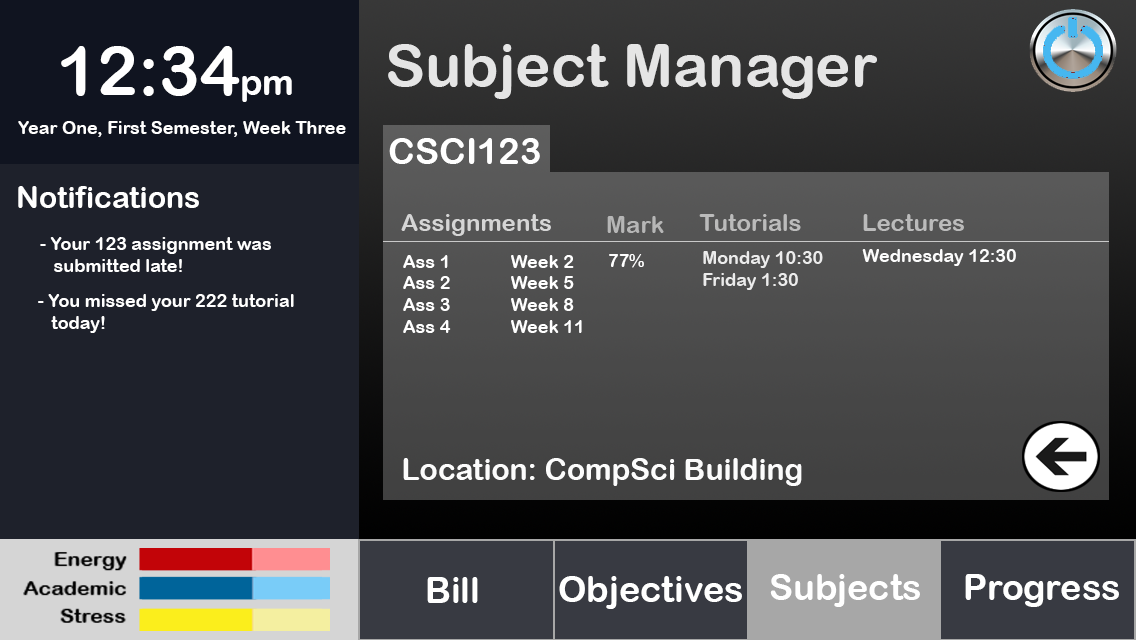
<style>
.page{position:relative;width:1136px;height:640px}
.page>*{position:absolute;margin:0}
.t1{font:68px "ArialRoundedMTBold";color:#ffffff}
.t2{font:36px "ArialRoundedMTBold";color:#ffffff}
.t3{font:60px "ArialRoundedMTBold";color:#e5e5e5}
.t4{font:18px "ArialRoundedMTBold";color:#ffffff}
.t5{font:30px "ArialRoundedMTBold";color:#ffffff}
.t6{font:24px "ArialRoundedMTBold";color:#d5d5d5}
.t7{font:24px "ArialRoundedMTBold";color:#b6b6b6}
.t8{font:24px "ArialRoundedMTBold";color:#bbbbbb}
.t9{font:18px "ArialRoundedMTBold";color:#ececec}
.t10{font:18px "ArialRoundedMTBold";color:#fcfcfc}
.t11{font:30px "ArialRoundedMTBold";color:#fcfcfc}
</style>
<div class="page">
<p class="t1" style="left:61px;top:46px;width:231px;height:56px">12:34<span class="t2">pm</span></p>
<p class="t3" style="left:388px;top:44px;width:489px;height:55px">Subject Manager</p>
<p class="t4" style="left:18px;top:121px;width:328px;height:16px">Year One, First Semester, Week Three</p>
<p class="t2" style="left:389px;top:138px;width:151px;height:26px">CSCI123</p>
<p class="t5" style="left:18px;top:186px;width:181px;height:22px">Notifications</p>
<p class="t6" style="left:401px;top:214px;width:150px;height:22px">Assignments</p>
<p class="t7" style="left:607px;top:216px;width:57px;height:17px">Mark</p>
<p class="t8" style="left:699px;top:214px;width:102px;height:17px">Tutorials</p>
<p class="t8" style="left:863px;top:214px;width:101px;height:17px">Lectures</p>
<p class="t4" style="left:40px;top:237px;width:231px;height:35px">- Your 123 assignment was <br>   submitted late!</p>
<p class="t4" style="left:403px;top:255px;width:179px;height:78px">Ass 1  Week 2<br>Ass 2  Week 5<br>Ass 3  Week 8<br>Ass 4  Week 11</p>
<p class="t4" style="left:609px;top:254px;width:35px;height:14px">77%</p>
<p class="t9" style="left:703px;top:251px;width:120px;height:39px">Monday 10:30<br>Friday 1:30</p>
<p class="t10" style="left:862px;top:249px;width:154px;height:17px">Wednesday 12:30</p>
<p class="t4" style="left:38px;top:294px;width:256px;height:39px">- You missed your 222 tutorial <br>   today!</p>
<p class="t11" style="left:403px;top:458px;width:399px;height:28px">Location: CompSci Building</p>
<p class="t2" style="left:427px;top:577px;width:51px;height:26px">Bill</p>
<p class="t2" style="left:559px;top:576px;width:183px;height:33px">Objectives</p>
<p class="t2" style="left:770px;top:574px;width:150px;height:33px">Subjects</p>
<p class="t2" style="left:965px;top:574px;width:154px;height:33px">Progress</p>
</div>
